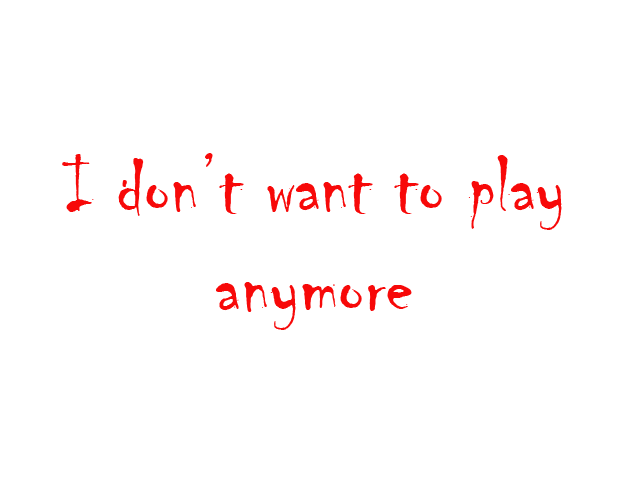
<style>
.page{position:relative;width:630px;height:500px;background:#ffffff}
.page>*{position:absolute;margin:0}
.t1{font:83.3px "Chiller-Regular";color:#f80909}
</style>
<div class="page">
<p class="t1" style="left:62px;top:153px;width:500px;height:177px;text-align:center">I don’t want to play anymore</p>
</div>
